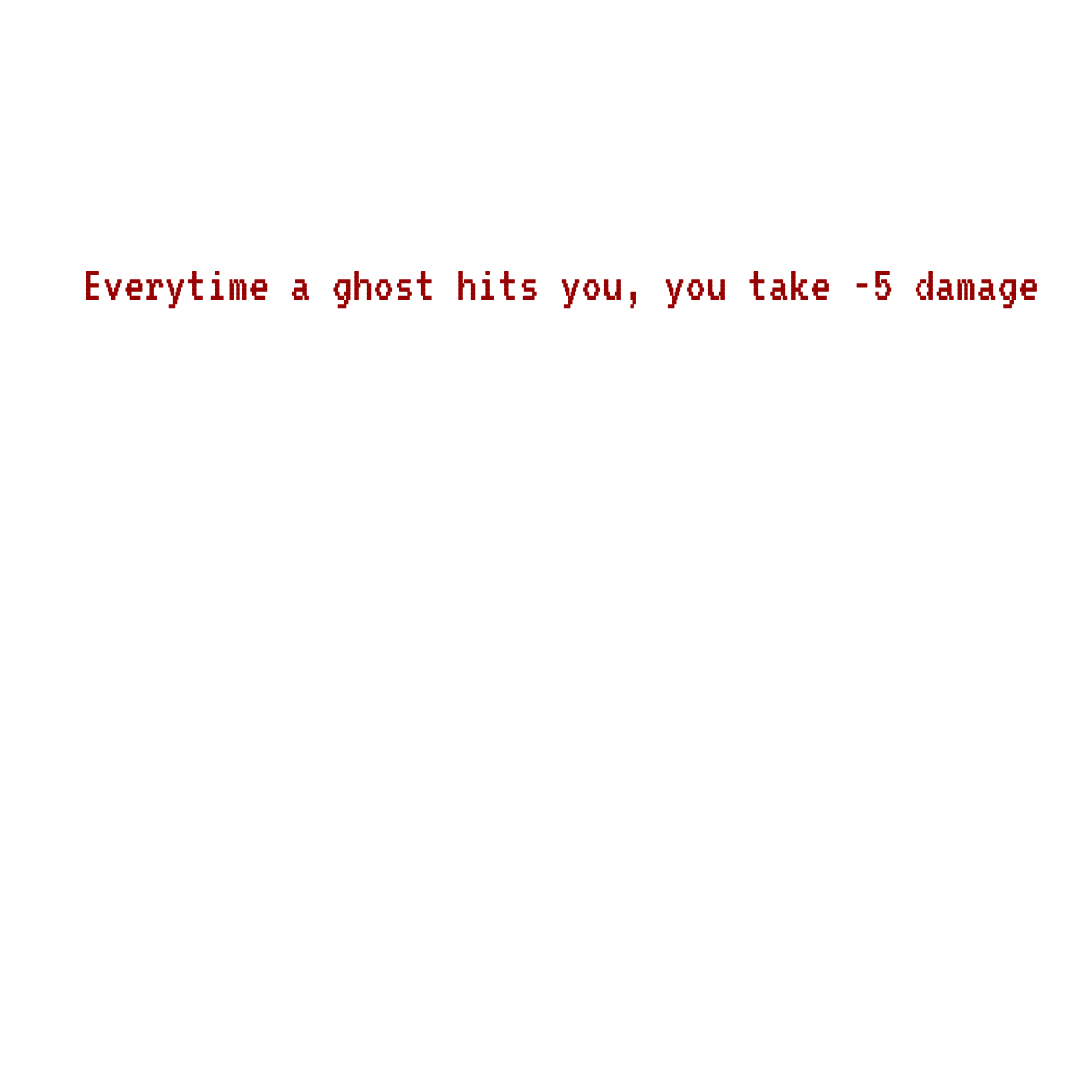
<style>
.page{position:relative;width:1080px;height:1080px;background:#ffffff}
.page>*{position:absolute;margin:0}
.t1{font:52px "VT323-Regular";color:#970303}
</style>
<div class="page">
<p class="t1" style="left:85px;top:270px;width:952px;height:39px">Everytime a ghost hits you, you take -5 damage</p>
</div>
